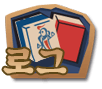
<style>
.page{position:relative;width:102px;height:89px;background:#ffffff}
.page>*{position:absolute;margin:0}
.t1{font:33.4px "SDKukdetopokki-bBd";letter-spacing:0.08em}
</style>
<div class="page">
<p class="t1" style="left:3px;top:48px;width:64px;height:26px">로그</p>
</div>
